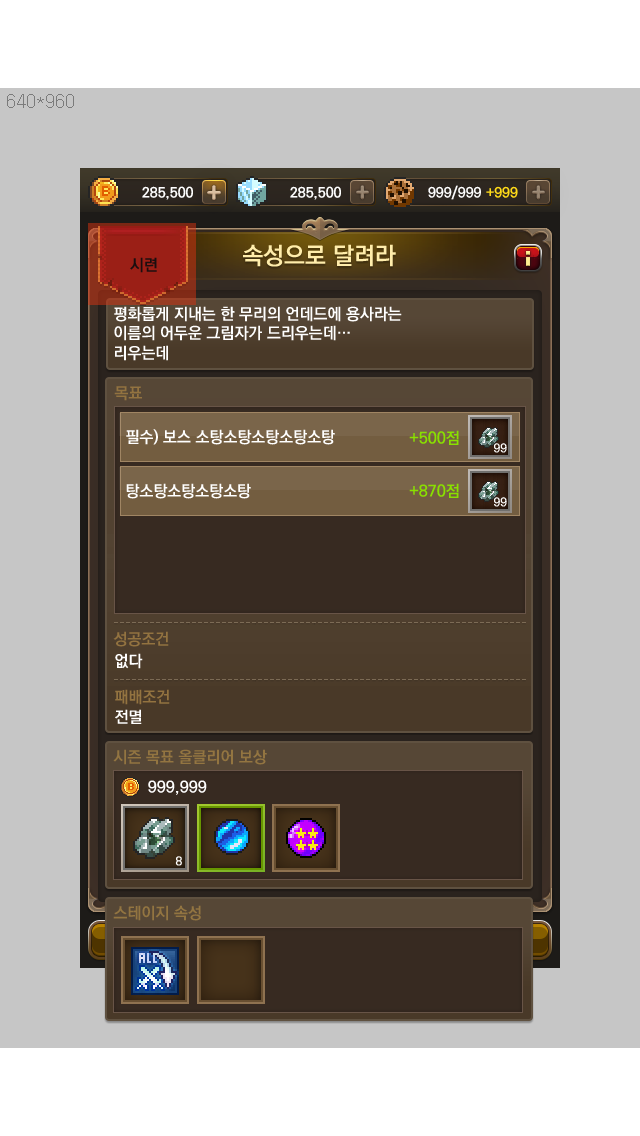
<style>
.page{position:relative;width:640px;height:1136px;background:#c6c6c6}
.page>*{position:absolute;margin:0}
.t1{font:24px "KoPubDotumBold";color:#ffedab}
.t2{font:16px "KoPubDotumBold";color:#1b0e0f}
.t3{font:16px "KoPubDotumBold";color:#ffffff}
.t4{font:16px "KoPubDotumBold";color:#937340}
.t5{font:16px "KoPubDotumBold";color:#89e000}
.t6{font:12px "KoPubDotumBold";color:#ffffff}
.t7{font:16px "KoPubDotumBold";color:#937541}
</style>
<div class="page">
<p class="t1" style="left:243px;top:244px;width:153px;height:23px">속성으로 달려라</p>
<p class="t2" style="left:130px;top:257px;width:27px;height:16px">시련</p>
<p class="t3" style="left:114px;top:306px;width:288px;height:55px">평화롭게 지내는 한 무리의 언데드에 용사라는 <br>이름의 어두운 그림자가 드리우는데…<br>리우는데</p>
<p class="t4" style="left:114px;top:386px;width:28px;height:15px">목표</p>
<p class="t3" style="left:126px;top:429px;width:209px;height:16px">필수) 보스 소탕소탕소탕소탕소탕</p>
<p class="t5" style="left:409px;top:430px;width:50px;height:15px">+500점</p>
<p class="t6" style="left:494px;top:443px;width:13px;height:10px">99</p>
<p class="t3" style="left:126px;top:483px;width:125px;height:16px">탕소탕소탕소탕소탕</p>
<p class="t5" style="left:409px;top:483px;width:50px;height:15px">+870점</p>
<p class="t6" style="left:494px;top:497px;width:13px;height:10px">99</p>
<p class="t4" style="left:113px;top:631px;width:56px;height:16px">성공조건</p>
<p class="t3" style="left:115px;top:653px;width:28px;height:16px">없다</p>
<p class="t4" style="left:115px;top:689px;width:55px;height:16px">패배조건</p>
<p class="t3" style="left:115px;top:709px;width:27px;height:15px">전멸</p>
<p class="t7" style="left:113px;top:749px;width:154px;height:16px">시즌 목표 올클리어 보상</p>
<p class="t3" style="left:148px;top:780px;width:59px;height:15px">999,999</p>
<p class="t6" style="left:175px;top:856px;width:7px;height:10px">8</p>
<p class="t7" style="left:113px;top:905px;width:88px;height:16px">스테이지 속성</p>
</div>
